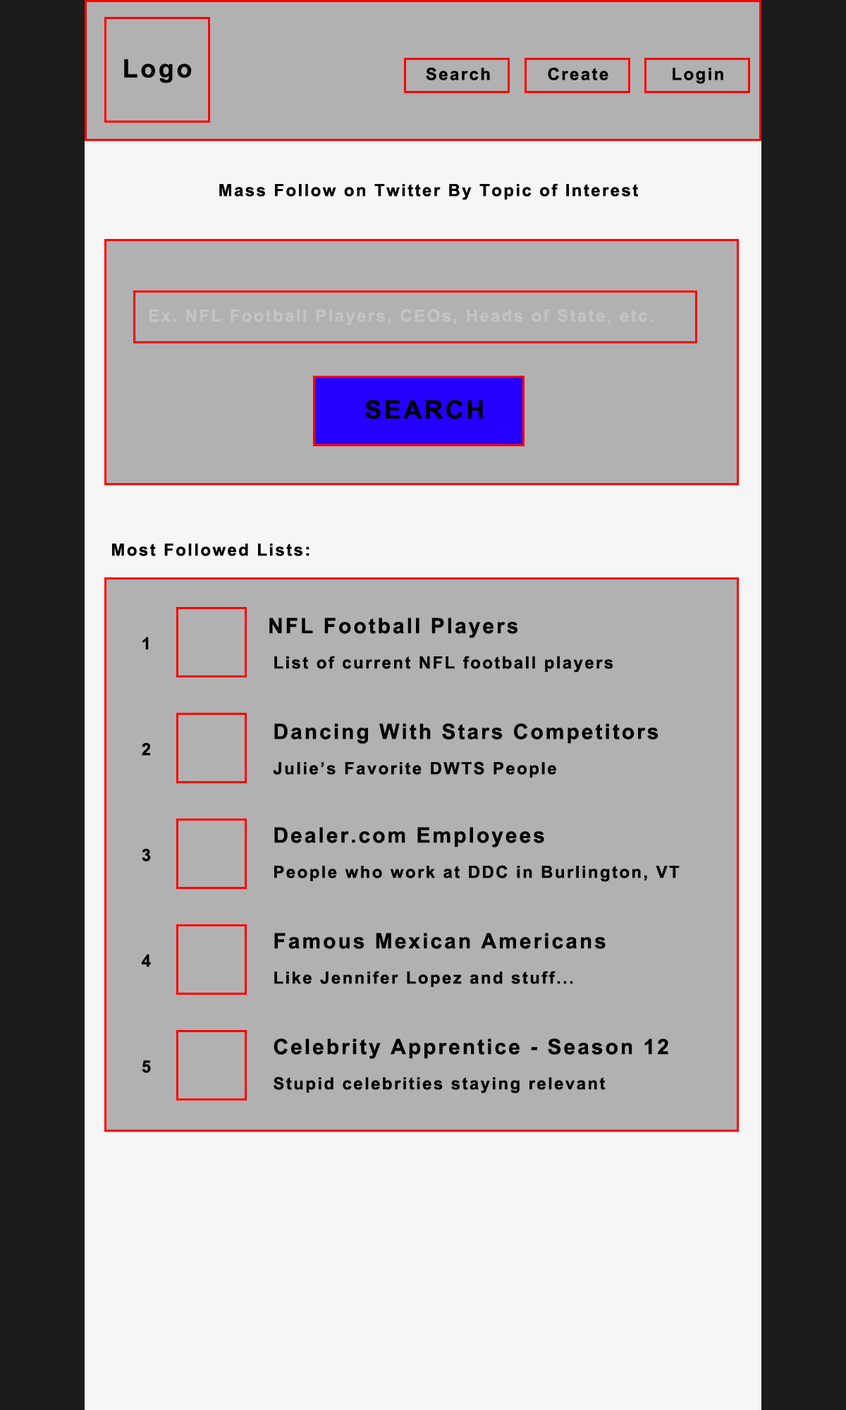
<style>
.page{position:relative;width:846px;height:1410px;background:#b1b1b1}
.page>*{position:absolute;margin:0}
.t1{font:25.4px "Arial-BoldMT";letter-spacing:0.1em;color:#000000}
.t2{font:16.9px "Arial-BoldMT";letter-spacing:0.1em;color:#000000}
.t3{font:16.9px "Arial-BoldMT";letter-spacing:0.1em;color:#c4c4c4}
.t4{font:21.1px "Arial-BoldMT";letter-spacing:0.1em;color:#000000}
</style>
<div class="page">
<p class="t1" style="left:124px;top:59px;width:68px;height:24px">Logo</p>
<p class="t2" style="left:426px;top:67px;width:64px;height:13px">Search</p>
<p class="t2" style="left:548px;top:67px;width:60px;height:13px">Create</p>
<p class="t2" style="left:672px;top:68px;width:51px;height:16px">Login</p>
<p class="t2" style="left:219px;top:183px;width:419px;height:17px">Mass Follow on Twitter By Topic of Interest</p>
<p class="t3" style="left:149px;top:309px;width:504px;height:17px">Ex. NFL Football Players, CEOs, Heads of State, etc.</p>
<p class="t1" style="left:365px;top:400px;width:118px;height:19px">SEARCH</p>
<p class="t2" style="left:112px;top:543px;width:197px;height:13px">Most Followed Lists:</p>
<p class="t4" style="left:269px;top:617px;width:248px;height:21px">NFL Football Players</p>
<p class="t2" style="left:142px;top:637px;width:7px;height:13px">1</p>
<p class="t2" style="left:274px;top:656px;width:339px;height:16px">List of current NFL football players</p>
<p class="t4" style="left:274px;top:723px;width:384px;height:21px">Dancing With Stars Competitors</p>
<p class="t2" style="left:142px;top:742px;width:8px;height:14px">2</p>
<p class="t2" style="left:273px;top:761px;width:283px;height:16px">Julie’s Favorite DWTS People</p>
<p class="t4" style="left:274px;top:827px;width:270px;height:20px">Dealer.com Employees</p>
<p class="t2" style="left:142px;top:848px;width:9px;height:13px">3</p>
<p class="t2" style="left:274px;top:865px;width:405px;height:17px">People who work at DDC in Burlington, VT</p>
<p class="t4" style="left:274px;top:933px;width:331px;height:16px">Famous Mexican Americans</p>
<p class="t2" style="left:142px;top:954px;width:9px;height:13px">4</p>
<p class="t2" style="left:274px;top:971px;width:299px;height:16px">Like Jennifer Lopez and stuff...</p>
<p class="t4" style="left:273px;top:1038px;width:395px;height:21px">Celebrity Apprentice - Season 12</p>
<p class="t2" style="left:142px;top:1060px;width:9px;height:13px">5</p>
<p class="t2" style="left:273px;top:1076px;width:332px;height:17px">Stupid celebrities staying relevant</p>
</div>
